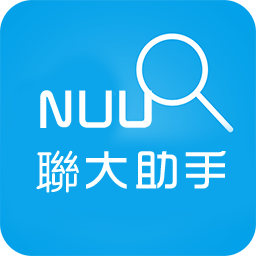
<style>
.page{position:relative;width:256px;height:256px;background:#0ca4ea}
.page>*{position:absolute;margin:0}
.t1{font:50px "Dreamofgirl";letter-spacing:0.1em;color:#feffff;text-transform:uppercase}
.t2{font:45px "Dreamofgirl";letter-spacing:0.1em;color:#feffff;text-transform:uppercase}
</style>
<div class="page">
<p class="t1" style="left:40px;top:90px;width:112px;height:38px">NUU</p>
<p class="t2" style="left:36px;top:150px;width:190px;height:43px">聯大助手</p>
</div>
